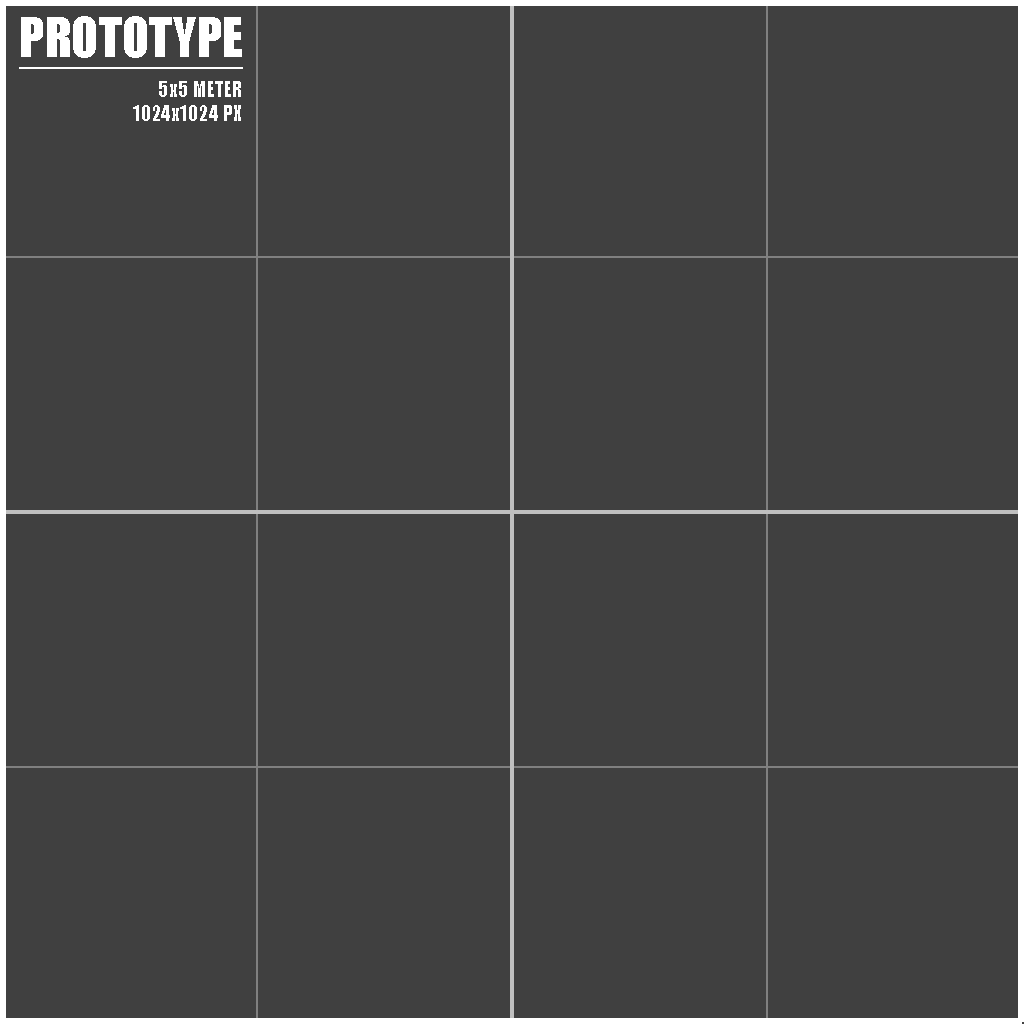
<style>
.page{position:relative;width:1024px;height:1024px;background:#404040}
.page>*{position:absolute;margin:0}
.t1{font:20px "Impact";color:#ffffff}
.t2{font:50px "Impact";color:#ffffff;text-decoration:underline}
.t3{font:50px/40px "Impact";color:#ffffff;text-decoration:underline}
.t4{font:20px/40px "Impact";color:#ffffff}
</style>
<div class="page">
<p class="t1" style="left:19px;top:16px;width:224px;height:105px;text-align:right"><span class="t2">PROTOTY</span><span class="t3">PE<br></span><span class="t4">5x</span>5 METER<br>1024x1024 PX</p>
</div>
